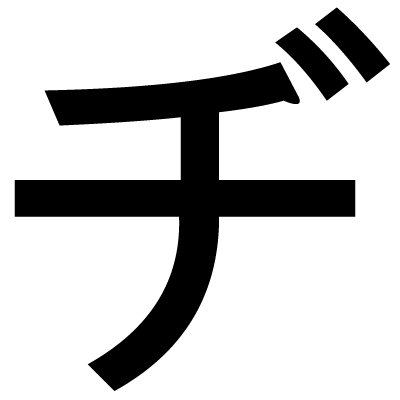
<style>
.page{position:relative;width:400px;height:400px;background:#ffffff}
.page>*{position:absolute;margin:0}
.t1{font:424.8px "MS-PGothic";color:#000000}
</style>
<div class="page">
<p class="t1" style="left:14px;top:7px;width:376px;height:384px">ヂ</p>
</div>
